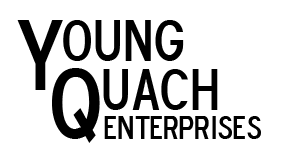
<style>
.page{position:relative;width:300px;height:150px;background:#ffffff}
.page>*{position:absolute;margin:0}
.t1{font:100px "BlueHighwayDType";color:#000000}
.t2{font:58.3px "BlueHighwayDType";color:#000000}
.t3{font:33.3px "BlueHighwayDType";color:#000000}
</style>
<div class="page">
<p class="t1" style="left:17px;top:20px;width:46px;height:70px">Y</p>
<p class="t2" style="left:63px;top:20px;width:121px;height:41px">oung</p>
<p class="t1" style="left:52px;top:68px;width:48px;height:75px">Q</p>
<p class="t2" style="left:103px;top:69px;width:115px;height:41px">uach</p>
<p class="t3" style="left:104px;top:116px;width:157px;height:23px">Enterprises</p>
</div>
